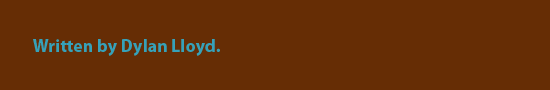
<style>
.page{position:relative;width:550px;height:90px;background:#662d05}
.page>*{position:absolute;margin:0}
.t1{font:18px "MyriadPro-Bold";color:#36a1b9}
</style>
<div class="page">
<p class="t1" style="left:33px;top:39px;width:187px;height:17px">Written by Dylan Lloyd.</p>
</div>
